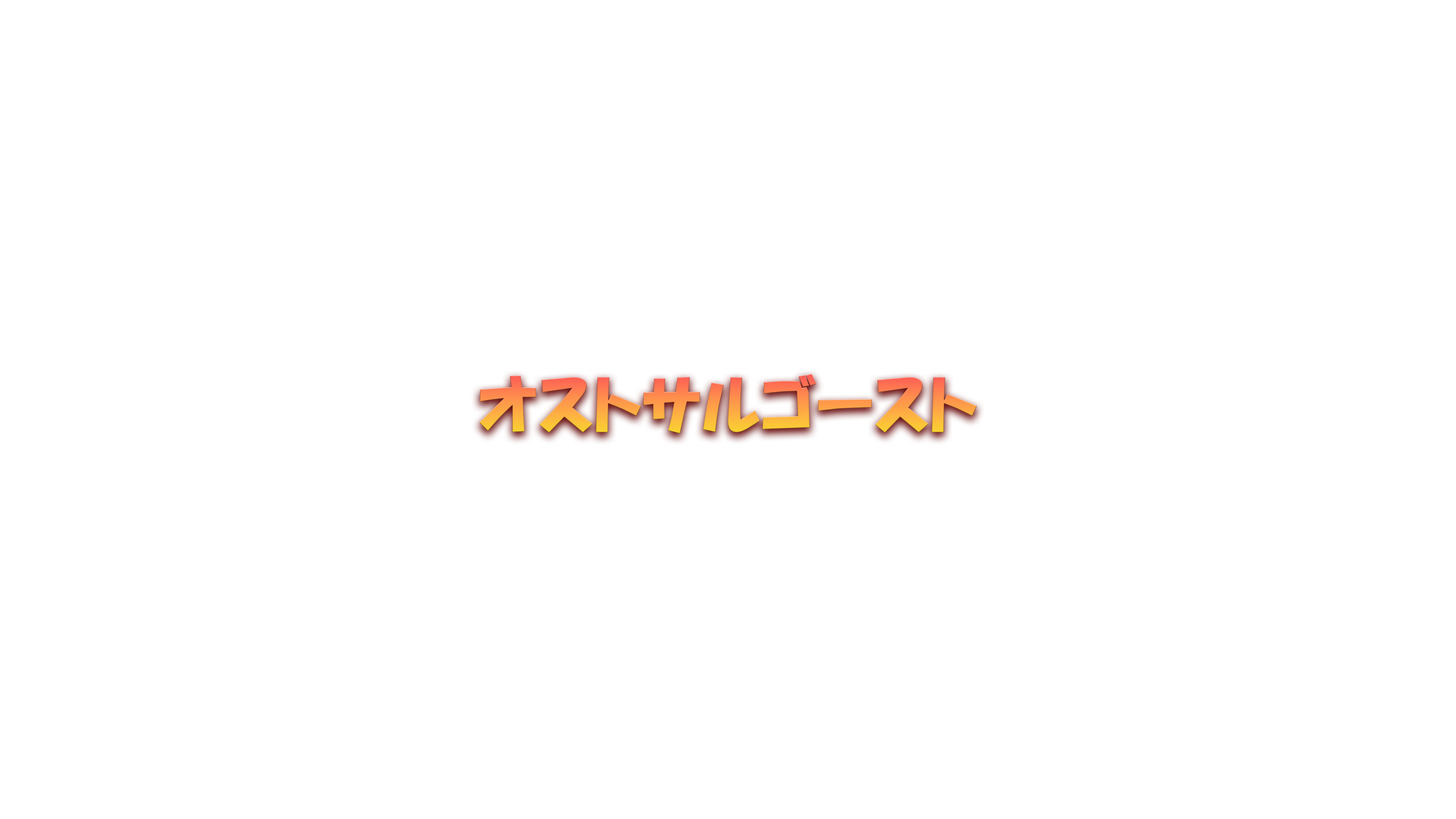
<style>
.page{position:relative;width:1456px;height:819px;background:#ffffff}
.page>*{position:absolute;margin:0}
.t1{font:64.2px "HGPSoeiKakupoptai"}
</style>
<div class="page">
<p class="t1" style="left:479px;top:374px;width:498px;height:60px">オストサルゴースト</p>
</div>
